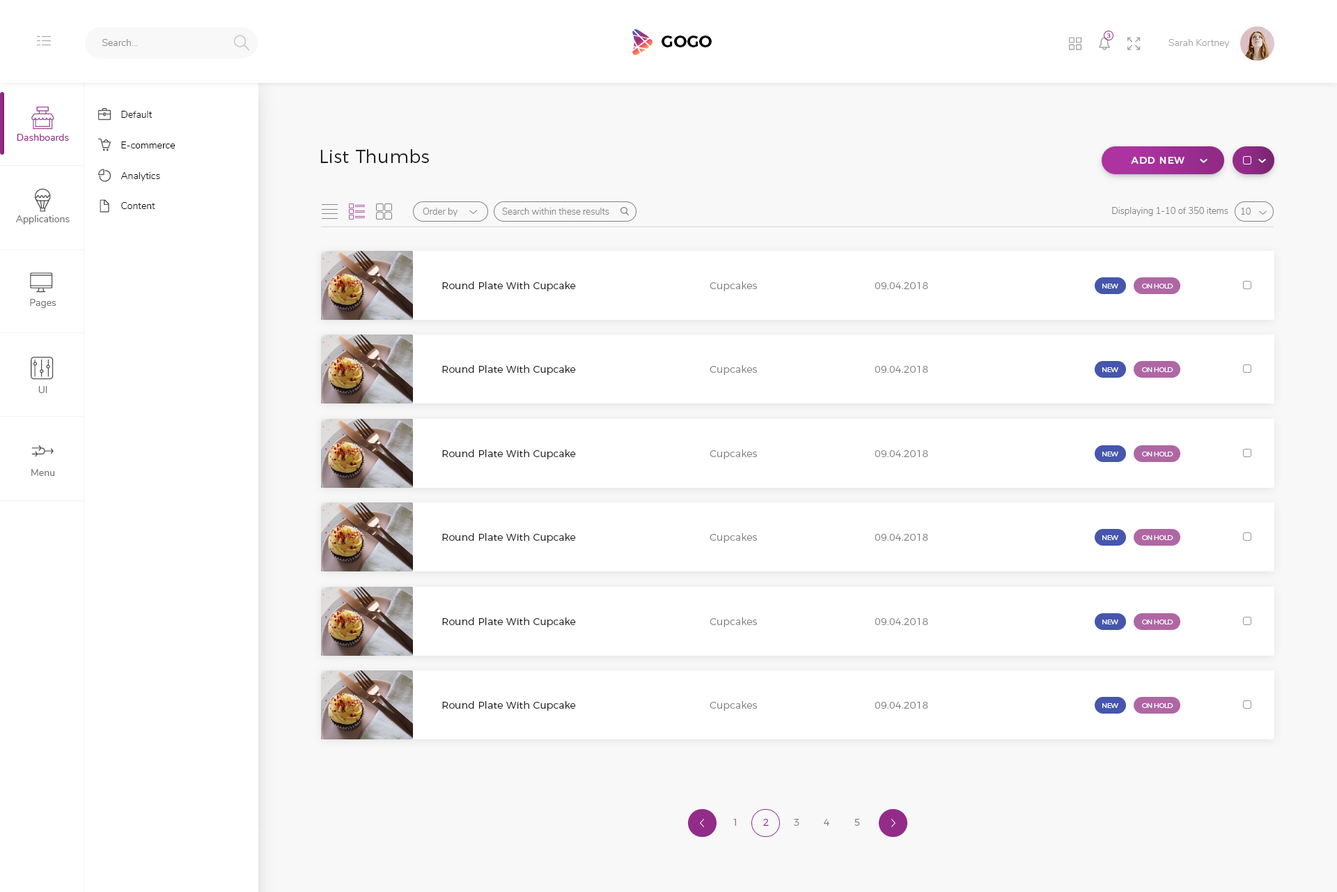
<style>
.page{position:relative;width:1337px;height:892px;background:#ffffff}
.page>*{position:absolute;margin:0}
.t1{font:9.8px "Nunito-Light";color:#898989}
.t2{font:16.7px "Montserrat-SemiBold";color:#000000}
.t3{font:6.3px "Nunito-Regular";letter-spacing:0.02em;color:#98418f}
.t4{font:9.8px "Nunito-Light";color:#a0a0a0}
.t5{font:9.8px "Nunito-Light";color:#000000}
.t6{font:9.8px "Nunito-Regular";color:#922c88}
.t7{font:18.1px "Montserrat-Light";letter-spacing:0.02em;color:#212121}
.t8{font:9.8px "Montserrat-Medium";letter-spacing:0.06em;color:#ffffff}
.t9{font:9.1px "Nunito-Light";color:#828282}
.t10{font:9.8px "Nunito-Regular";color:#737373}
.t11{font:9.8px "Montserrat-Light";letter-spacing:0.02em;color:#212121}
.t12{font:9.8px "Montserrat-Light";letter-spacing:0.02em;color:#858585}
.t13{font:7px "Montserrat-Light";letter-spacing:-0.06em;color:#ffffff}
.t14{font:9.8px "Montserrat-Light";letter-spacing:0.02em;color:#95328b}
</style>
<div class="page">
<p class="t1" style="left:102px;top:39px;width:36px;height:7px">Search...</p>
<p class="t2" style="left:662px;top:36px;width:50px;height:11px">GOGO</p>
<p class="t3" style="left:1108px;top:33px;width:3px;height:5px">3</p>
<p class="t4" style="left:1169px;top:39px;width:61px;height:9px">Sarah Kortney</p>
<p class="t5" style="left:121px;top:111px;width:32px;height:7px">Default</p>
<p class="t6" style="left:17px;top:134px;width:52px;height:7px">Dashboards</p>
<p class="t5" style="left:121px;top:141px;width:55px;height:7px">E-commerce</p>
<p class="t7" style="left:320px;top:149px;width:109px;height:14px">List Thumbs</p>
<p class="t8" style="left:1131px;top:157px;width:54px;height:7px">ADD NEW</p>
<p class="t5" style="left:121px;top:172px;width:39px;height:9px">Analytics</p>
<p class="t5" style="left:121px;top:202px;width:34px;height:7px">Content</p>
<p class="t9" style="left:423px;top:208px;width:35px;height:9px">Order by</p>
<p class="t9" style="left:502px;top:208px;width:107px;height:7px">Search within these results</p>
<p class="t9" style="left:1112px;top:207px;width:117px;height:9px">Displaying 1-10 of 350 items</p>
<p class="t9" style="left:1241px;top:208px;width:10px;height:7px">10</p>
<p class="t10" style="left:16px;top:215px;width:54px;height:9px">Applications</p>
<p class="t11" style="left:442px;top:281px;width:134px;height:10px">Round Plate With Cupcake</p>
<p class="t12" style="left:710px;top:281px;width:47px;height:10px">Cupcakes</p>
<p class="t12" style="left:875px;top:282px;width:54px;height:7px">09.04.2018</p>
<p class="t13" style="left:1103px;top:284px;width:16px;height:4px">NEW</p>
<p class="t13" style="left:1142px;top:284px;width:32px;height:4px">ON HOLD</p>
<p class="t10" style="left:30px;top:299px;width:26px;height:9px">Pages</p>
<p class="t11" style="left:442px;top:365px;width:134px;height:10px">Round Plate With Cupcake</p>
<p class="t12" style="left:710px;top:365px;width:47px;height:10px">Cupcakes</p>
<p class="t12" style="left:875px;top:366px;width:54px;height:7px">09.04.2018</p>
<p class="t13" style="left:1103px;top:367px;width:16px;height:5px">NEW</p>
<p class="t13" style="left:1142px;top:367px;width:32px;height:5px">ON HOLD</p>
<p class="t10" style="left:38px;top:386px;width:9px;height:7px">UI</p>
<p class="t11" style="left:442px;top:449px;width:134px;height:10px">Round Plate With Cupcake</p>
<p class="t12" style="left:710px;top:449px;width:47px;height:10px">Cupcakes</p>
<p class="t12" style="left:875px;top:450px;width:54px;height:7px">09.04.2018</p>
<p class="t13" style="left:1103px;top:451px;width:16px;height:5px">NEW</p>
<p class="t13" style="left:1142px;top:451px;width:32px;height:5px">ON HOLD</p>
<p class="t10" style="left:31px;top:469px;width:24px;height:7px">Menu</p>
<p class="t11" style="left:442px;top:533px;width:134px;height:10px">Round Plate With Cupcake</p>
<p class="t12" style="left:710px;top:533px;width:47px;height:10px">Cupcakes</p>
<p class="t12" style="left:875px;top:534px;width:54px;height:7px">09.04.2018</p>
<p class="t13" style="left:1103px;top:535px;width:16px;height:5px">NEW</p>
<p class="t13" style="left:1142px;top:535px;width:32px;height:5px">ON HOLD</p>
<p class="t11" style="left:442px;top:617px;width:134px;height:10px">Round Plate With Cupcake</p>
<p class="t12" style="left:710px;top:617px;width:47px;height:10px">Cupcakes</p>
<p class="t12" style="left:875px;top:618px;width:54px;height:7px">09.04.2018</p>
<p class="t13" style="left:1103px;top:619px;width:16px;height:5px">NEW</p>
<p class="t13" style="left:1142px;top:619px;width:32px;height:5px">ON HOLD</p>
<p class="t11" style="left:442px;top:701px;width:134px;height:9px">Round Plate With Cupcake</p>
<p class="t12" style="left:710px;top:701px;width:47px;height:9px">Cupcakes</p>
<p class="t12" style="left:875px;top:701px;width:54px;height:7px">09.04.2018</p>
<p class="t13" style="left:1103px;top:703px;width:16px;height:5px">NEW</p>
<p class="t13" style="left:1142px;top:703px;width:32px;height:5px">ON HOLD</p>
<p class="t12" style="left:733px;top:818px;width:3px;height:7px">1</p>
<p class="t14" style="left:763px;top:818px;width:6px;height:7px">2</p>
<p class="t12" style="left:794px;top:818px;width:6px;height:7px">3</p>
<p class="t12" style="left:824px;top:818px;width:6px;height:7px">4</p>
<p class="t12" style="left:855px;top:818px;width:5px;height:7px">5</p>
</div>
